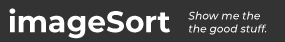
<style>
.page{position:relative;width:285px;height:42px;background:#333333}
.page>*{position:absolute;margin:0}
.t1{font:30px "Montserrat-Bold";color:#ffffff}
.t2{font:10.8px "Montserrat-MediumItalic";color:#ffffff}
</style>
<div class="page">
<p class="t1" style="left:9px;top:8px;width:161px;height:31px">imageSort</p>
<p class="t2" style="left:188px;top:11px;width:79px;height:24px">Show me the<br>the good stuff.</p>
</div>
